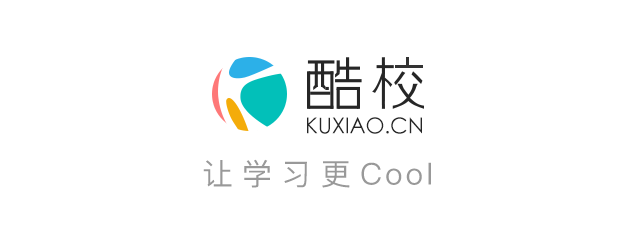
<style>
.page{position:relative;width:640px;height:243px;background:#ffffff}
.page>*{position:absolute;margin:0}
.t1{font:21.9px "STXihei";letter-spacing:-0.01em;color:#262626}
.t2{font:30px "PingFang-SC-Medium";letter-spacing:-0.01em;color:#999999}
.t3{font:30px "PingFang-SC-Medium";letter-spacing:0.1em;color:#999999}
</style>
<div class="page">
<p class="t1" style="left:307px;top:117px;width:115px;height:17px">KUXIAO.CN</p>
<p class="t2" style="left:203px;top:159px;width:228px;height:29px">让 学 习 更 <span class="t3">Cool</span></p>
</div>
